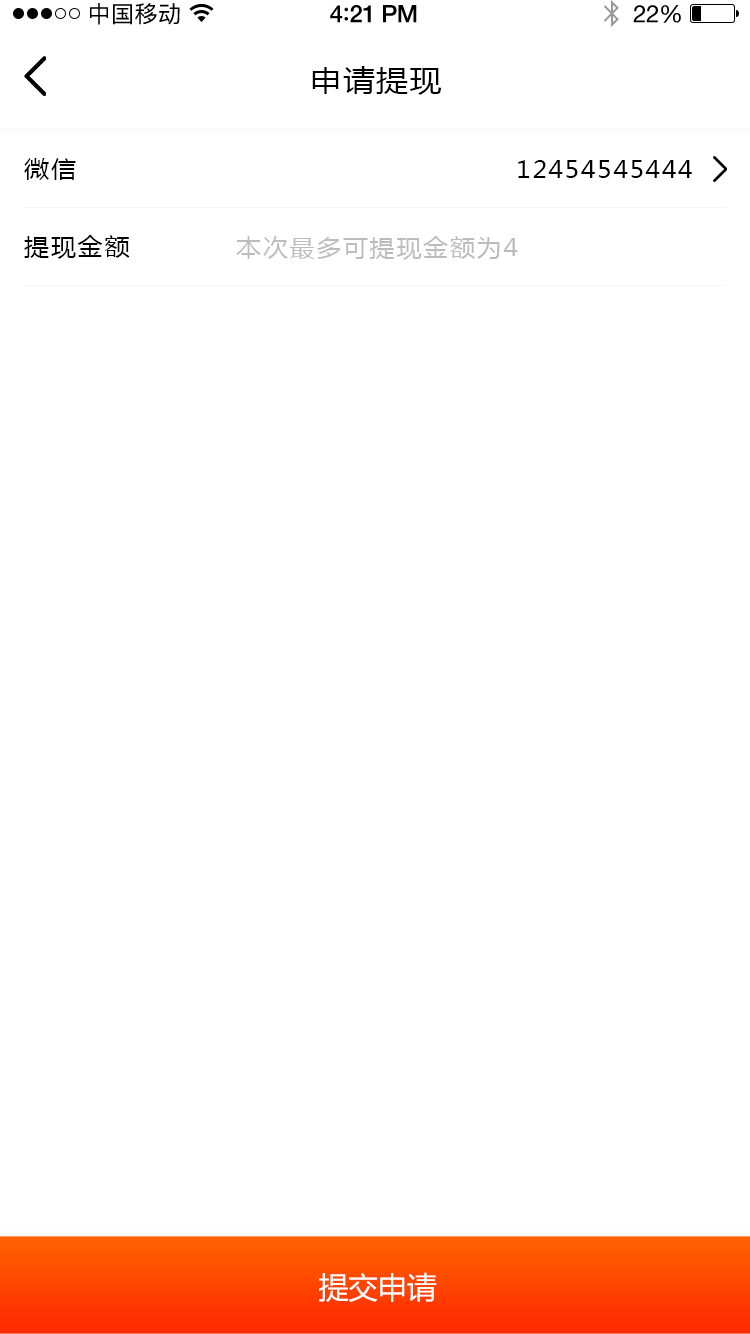
<style>
.page{position:relative;width:750px;height:1334px;background:#ffffff}
.page>*{position:absolute;margin:0}
.t1{font:23px "PingFangSC-Regular";letter-spacing:0.02em;color:#000000}
.t2{font:24px "HelveticaNeue-Medium";letter-spacing:-0.02em;color:#000000}
.t3{font:26px "Avenir-Medium";letter-spacing:-0.02em;color:#000000}
.t4{font:24px "HelveticaNeue";letter-spacing:-0.02em;color:#000000}
.t5{font:30px "MicrosoftYaHei";letter-spacing:0.05em;color:#000000;scale:1.06 1}
.t6{font:24px "MicrosoftYaHei";letter-spacing:0.05em;color:#000000;scale:1.06 1}
.t7{font:24px "MicrosoftYaHei";letter-spacing:0.05em;color:#bdbdbd;scale:1.06 1}
.t8{font:30px "MicrosoftYaHei";letter-spacing:-0.02em;color:#ffffff}
</style>
<div class="page">
<p class="t1" style="left:90px;top:3px;width:90px;height:22px">中国移动</p>
<p class="t2" style="left:330px;top:5px;width:87px;height:18px">4<span class="t3">:</span>21 PM</p>
<p class="t4" style="left:633px;top:5px;width:48px;height:18px">22%</p>
<p class="t5" style="left:312px;top:66px;width:129px;height:29px">申请提现</p>
<p class="t6" style="left:24px;top:158px;width:52px;height:22px">微信</p>
<p class="t6" style="left:518px;top:160px;width:174px;height:18px">12454545444</p>
<p class="t6" style="left:24px;top:235px;width:106px;height:24px">提现金额</p>
<p class="t7" style="left:236px;top:236px;width:282px;height:24px">本次最多可提现金额为4</p>
<p class="t8" style="left:319px;top:1272px;width:118px;height:30px">提交申请</p>
</div>
